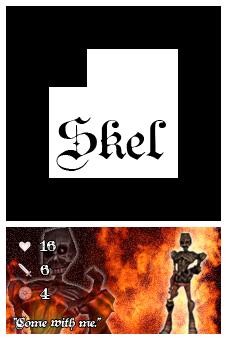
<style>
.page{position:relative;width:227px;height:340px;background:#000000}
.page>*{position:absolute;margin:0}
.t1{font:54px "TeutonicNo1-DemiBold";color:#000000}
.t2{font:16px/24px "TeutonicNo4-DemiBold";color:#fefefe}
.t3{font:12px "TeutonicNo2-DemiBold";color:#ffffff;font-style:italic}
</style>
<div class="page">
<p class="t1" style="left:56px;top:117px;width:110px;height:54px">Skel</p>
<p class="t2" style="left:40px;top:240px;width:16px;height:59px">16<br>6<br>4</p>
<p class="t3" style="left:13px;top:317px;width:89px;height:13px">“Come with me.”</p>
</div>
